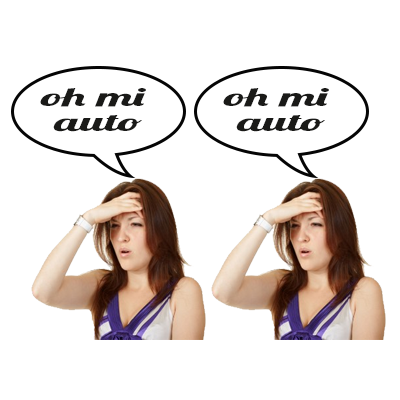
<style>
.page{position:relative;width:400px;height:400px;background:#ffffff}
.page>*{position:absolute;margin:0}
.t1{font:25px/24.6px "Lobster1.4";color:#1a1a18;scale:1.99 1}
</style>
<div class="page">
<p class="t1" style="left:40px;top:88px;width:106px;height:44px;text-align:center">oh mi<br> auto</p>
<p class="t1" style="left:223px;top:88px;width:106px;height:44px;text-align:center">oh mi<br> auto</p>
</div>
